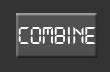
<style>
.page{position:relative;width:110px;height:72px;background:#333333}
.page>*{position:absolute;margin:0}
.t1{font:26px "DS-Digital";letter-spacing:-0.025em;color:#ffffff}
</style>
<div class="page">
<p class="t1" style="left:18px;top:27px;width:78px;height:17px">combine</p>
</div>
